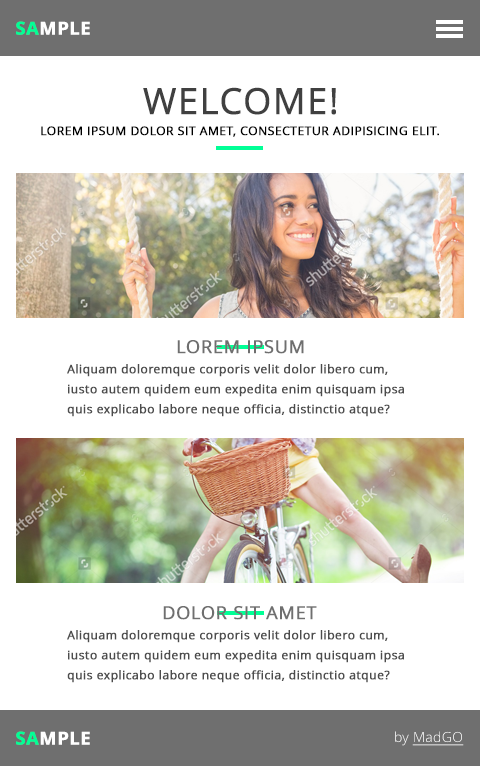
<style>
.page{position:relative;width:480px;height:766px;background:#ffffff}
.page>*{position:absolute;margin:0}
.t1{font:18px "OpenSans-Bold";letter-spacing:0.021em;color:#ffffff;text-transform:uppercase;font-weight:bold}
.t2{font:18px "OpenSans-Bold";letter-spacing:0.021em;color:#01ff96;text-transform:uppercase;font-weight:bold}
.t3{font:36px "OpenSans";letter-spacing:0.021em;color:#404040;text-transform:uppercase;font-weight:bold}
.t4{font:12px "OpenSans";letter-spacing:0.021em;color:#000000;text-transform:uppercase;font-weight:bold}
.t5{font:18px "OpenSans";letter-spacing:0.021em;color:#6f6f6f;text-transform:uppercase;font-weight:bold}
.t6{font:12px/20px "OpenSans";letter-spacing:0.021em;color:#4c4c4c;font-weight:bold}
.t7{font:14px "OpenSans-Light";letter-spacing:0.021em;color:#ffffff;text-decoration:underline}
.t8{font:14px "OpenSans-Light";letter-spacing:0.021em;color:#ffffff}
</style>
<div class="page">
<p class="t1" style="left:16px;top:21px;width:74px;height:14px"><span class="t2">SA</span>MPLE</p>
<p class="t3" style="left:143px;top:87px;width:193px;height:28px">welcome!</p>
<p class="t4" style="left:41px;top:126px;width:398px;height:11px">Lorem ipsum dolor sit amet, consectetur adipisicing elit.</p>
<p class="t5" style="left:177px;top:340px;width:127px;height:14px">LOREM IPSUM</p>
<p class="t6" style="left:67px;top:364px;width:337px;height:53px">Aliquam doloremque corporis velit dolor libero cum, iusto autem quidem eum expedita enim quisquam ipsa quis explicabo labore neque officia, distinctio atque?</p>
<p class="t5" style="left:163px;top:606px;width:154px;height:14px">DOLOR SIT AMET</p>
<p class="t6" style="left:67px;top:630px;width:337px;height:53px">Aliquam doloremque corporis velit dolor libero cum, iusto autem quidem eum expedita enim quisquam ipsa quis explicabo labore neque officia, distinctio atque?</p>
<p class="t1" style="left:16px;top:731px;width:74px;height:14px"><span class="t2">SA</span>MPLE</p>
<p class="t7" style="left:395px;top:731px;width:69px;height:15px"><span class="t8">by </span>MadGO</p>
</div>
